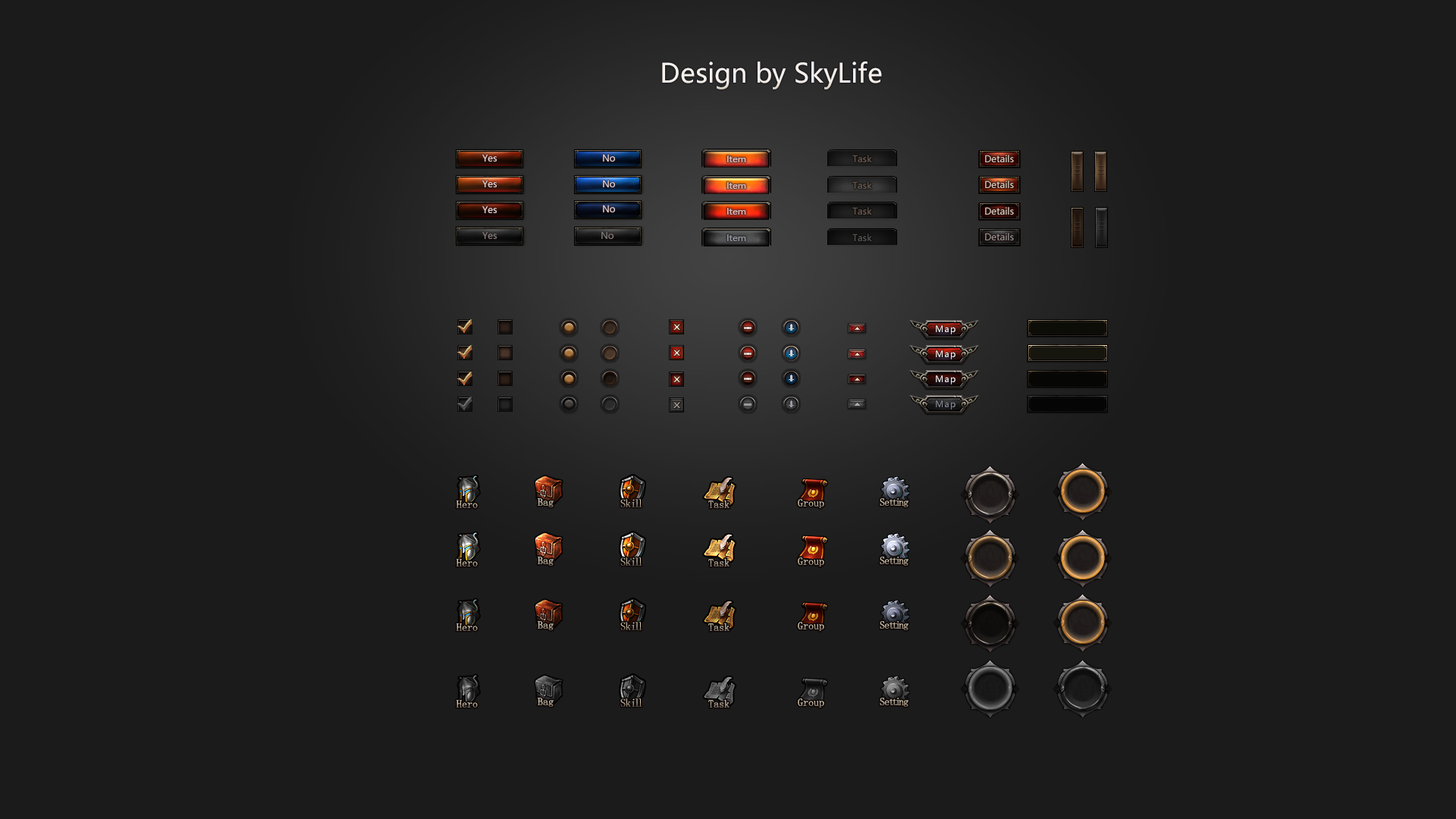
<style>
.page{position:relative;width:1456px;height:819px;background:#1b1b1b}
.page>*{position:absolute;margin:0}
.t1{font:26.4px "MicrosoftYaHei";color:#f8f1eb}
.t2{font:9.1px "MicrosoftYaHei";color:#e9d6d6}
.t3{font:9.1px "MicrosoftYaHei";color:#dabdbd}
.t4{font:9.1px "MicrosoftYaHei";color:#615249}
.t5{font:9.1px "MicrosoftYaHei";color:#daccbd}
.t6{font:9.1px "MicrosoftYaHei";color:#7f7f7f}
.t7{font:9.1px "MicrosoftYaHei";color:#4f4f4f}
.t8{font:9.1px "MicrosoftYaHei";color:#929292}
.t9{font:9.1px "MicrosoftYaHei";color:#979797}
.t10{font:8.7px "MicrosoftYaHei";letter-spacing:0.1em;color:#f8f1eb}
.t11{font:8.7px "MicrosoftYaHei";letter-spacing:0.1em;color:#8a8a8a}
.t12{font:10.6px "LiSu"}
.t13{font:11.4px "LiSu";letter-spacing:-0.19em}
.t14{font:11.4px "LiSu";letter-spacing:-0.05em}
.t15{font:10.6px "LiSu";letter-spacing:-0.19em;color:#c7baa4}
.t16{font:10.6px "LiSu";letter-spacing:-0.07em;color:#c7baa4}
</style>
<div class="page">
<p class="t1" style="left:662px;top:61px;width:220px;height:28px">Design by SkyLife</p>
<p class="t2" style="left:482px;top:154px;width:15px;height:8px">Yes</p>
<p class="t2" style="left:603px;top:154px;width:12px;height:8px">No</p>
<p class="t3" style="left:727px;top:155px;width:19px;height:7px">Item</p>
<p class="t4" style="left:852px;top:155px;width:20px;height:8px">Task</p>
<p class="t5" style="left:985px;top:155px;width:29px;height:7px">Details</p>
<p class="t2" style="left:482px;top:180px;width:15px;height:7px">Yes</p>
<p class="t2" style="left:603px;top:180px;width:12px;height:7px">No</p>
<p class="t3" style="left:727px;top:182px;width:19px;height:7px">Item</p>
<p class="t4" style="left:852px;top:181px;width:20px;height:9px">Task</p>
<p class="t5" style="left:985px;top:180px;width:29px;height:8px">Details</p>
<p class="t2" style="left:482px;top:206px;width:15px;height:7px">Yes</p>
<p class="t2" style="left:603px;top:205px;width:12px;height:7px">No</p>
<p class="t3" style="left:727px;top:208px;width:19px;height:7px">Item</p>
<p class="t4" style="left:852px;top:207px;width:20px;height:8px">Task</p>
<p class="t5" style="left:985px;top:207px;width:29px;height:8px">Details</p>
<p class="t6" style="left:482px;top:231px;width:15px;height:8px">Yes</p>
<p class="t6" style="left:601px;top:231px;width:12px;height:8px">No</p>
<p class="t7" style="left:852px;top:234px;width:20px;height:8px">Task</p>
<p class="t8" style="left:985px;top:233px;width:29px;height:7px">Details</p>
<p class="t9" style="left:727px;top:234px;width:19px;height:7px">Item</p>
<p class="t10" style="left:936px;top:325px;width:19px;height:9px">Map</p>
<p class="t10" style="left:936px;top:350px;width:19px;height:9px">Map</p>
<p class="t10" style="left:936px;top:375px;width:19px;height:9px">Map</p>
<p class="t11" style="left:936px;top:400px;width:19px;height:9px">Map</p>
<p class="t12" style="left:457px;top:500px;width:21px;height:8px">Hero</p>
<p class="t12" style="left:538px;top:498px;width:16px;height:9px">Bag</p>
<p class="t13" style="left:620px;top:499px;width:22px;height:8px"><span class="t14">Sk</span>ill</p>
<p class="t12" style="left:708px;top:500px;width:22px;height:8px">Task</p>
<p class="t12" style="left:798px;top:499px;width:26px;height:9px">Group</p>
<p class="t15" style="left:880px;top:498px;width:28px;height:9px"><span class="t16">Se</span>tti<span class="t16">ng</span></p>
<p class="t12" style="left:538px;top:557px;width:16px;height:9px">Bag</p>
<p class="t13" style="left:620px;top:557px;width:22px;height:9px"><span class="t14">Sk</span>ill</p>
<p class="t12" style="left:798px;top:557px;width:26px;height:9px">Group</p>
<p class="t15" style="left:880px;top:557px;width:28px;height:9px"><span class="t16">Se</span>tti<span class="t16">ng</span></p>
<p class="t12" style="left:457px;top:559px;width:21px;height:7px">Hero</p>
<p class="t12" style="left:708px;top:558px;width:22px;height:8px">Task</p>
<p class="t12" style="left:457px;top:623px;width:21px;height:8px">Hero</p>
<p class="t12" style="left:538px;top:621px;width:16px;height:9px">Bag</p>
<p class="t13" style="left:620px;top:622px;width:22px;height:8px"><span class="t14">Sk</span>ill</p>
<p class="t12" style="left:708px;top:623px;width:22px;height:8px">Task</p>
<p class="t12" style="left:798px;top:622px;width:26px;height:9px">Group</p>
<p class="t15" style="left:880px;top:621px;width:28px;height:9px"><span class="t16">Se</span>tti<span class="t16">ng</span></p>
<p class="t12" style="left:457px;top:700px;width:21px;height:8px">Hero</p>
<p class="t12" style="left:538px;top:698px;width:16px;height:9px">Bag</p>
<p class="t13" style="left:620px;top:698px;width:22px;height:9px"><span class="t14">Sk</span>ill</p>
<p class="t12" style="left:708px;top:699px;width:22px;height:9px">Task</p>
<p class="t12" style="left:798px;top:698px;width:26px;height:10px">Group</p>
<p class="t15" style="left:880px;top:698px;width:28px;height:9px"><span class="t16">Se</span>tti<span class="t16">ng</span></p>
</div>
